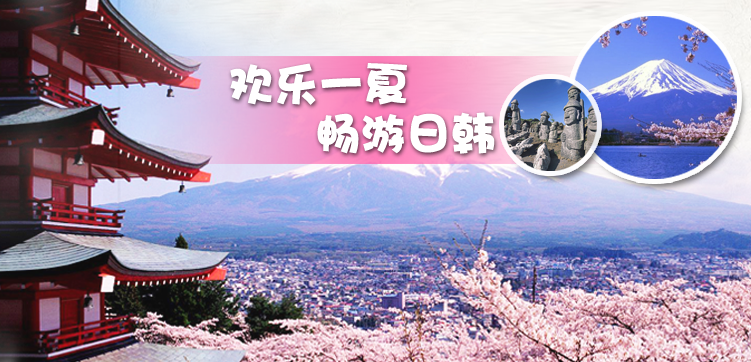
<style>
.page{position:relative;width:751px;height:362px}
.page>*{position:absolute;margin:0}
.t1{font:45.1px "DFPHaiBaoW12";color:#ffffff}
</style>
<div class="page">
<p class="t1" style="left:230px;top:63px;width:177px;height:42px">欢乐一夏</p>
<p class="t1" style="left:317px;top:112px;width:178px;height:42px">畅游日韩</p>
</div>
